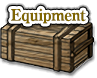
<style>
.page{position:relative;width:97px;height:78px;background:#ffffff}
.page>*{position:absolute;margin:0}
.t1{font:16px "RyuminPro-ExBold";letter-spacing:-0.04em;color:#7f6501}
</style>
<div class="page">
<p class="t1" style="left:11px;top:8px;width:75px;height:16px">Equipment</p>
</div>
